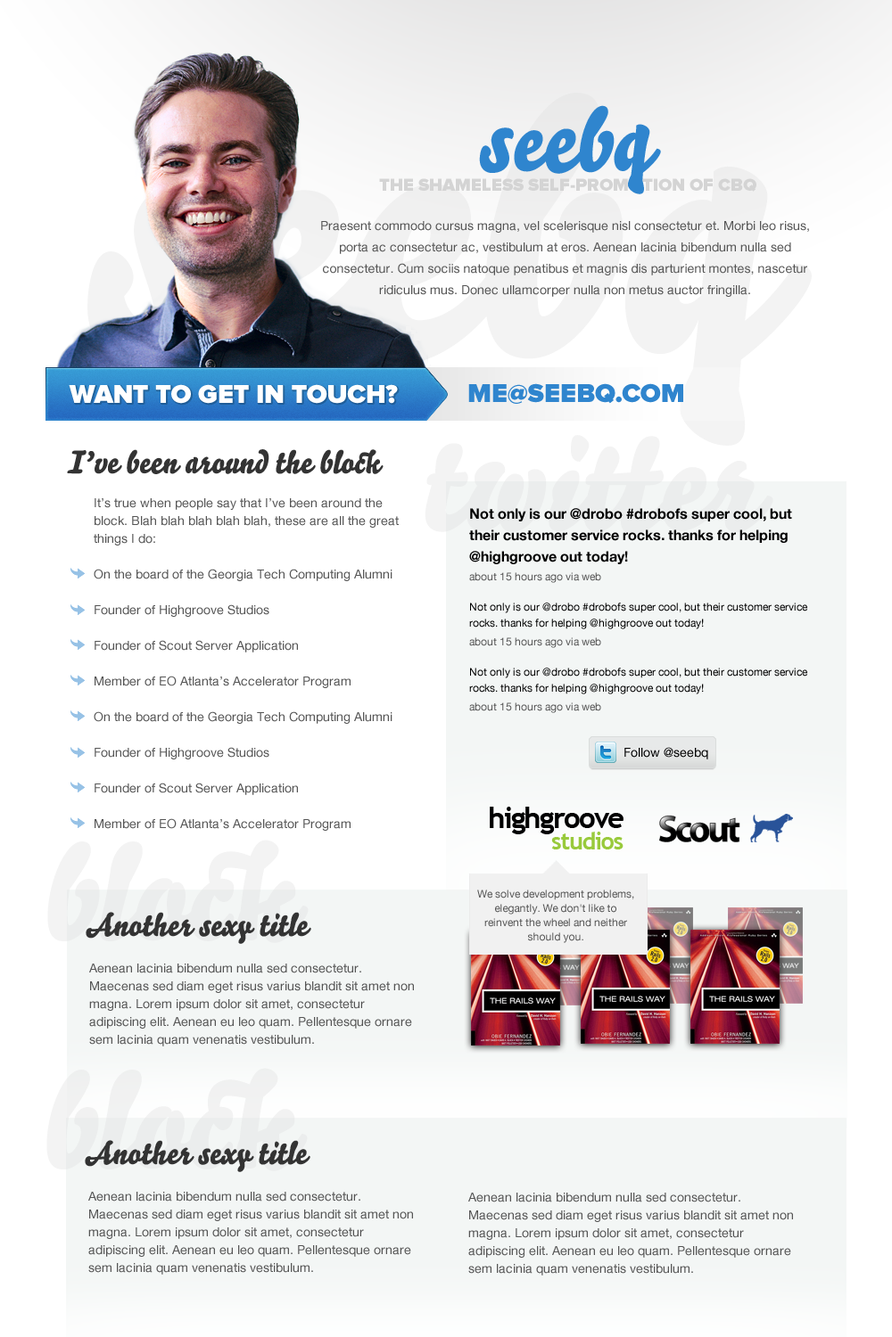
<style>
.page{position:relative;width:892px;height:1337px;background:#ffffff}
.page>*{position:absolute;margin:0}
.t1{font:12.5px/21.4px "HelveticaNeue";color:#555555}
.t2{font:89.2px "Bello-Pro";color:#2f85ce}
.t3{font:17.8px "ProximaNova-Black";color:#d4d4d4}
.t4{font:26.8px "ProximaNova-Black";color:#ffffff}
.t5{font:26.8px "ProximaNova-Black";color:#2f85ce}
.t6{font:32.1px "Bello-Pro";color:#333333}
.t7{font:12.5px/17.8px "HelveticaNeue";color:#555555}
.t8{font:14.3px/21.4px "HelveticaNeue-Bold";color:#000000}
.t9{font:10.7px/4.5px "HelveticaNeue";color:#555555}
.t10{font:10.7px/16px "HelveticaNeue";color:#000000}
.t11{font:12.5px "HelveticaNeue";color:#000000}
.t12{font:10.7px/14.3px "HelveticaNeue";color:#555555}
</style>
<div class="page">
<p class="t1" style="left:321px;top:105px;width:488px;height:192px;text-align:center"><span class="t2">seebq<br><br></span>Praesent commodo cursus magna, vel scelerisque nisl consectetur et. Morbi leo risus, porta ac consectetur ac, vestibulum at eros. Aenean lacinia bibendum nulla sed consectetur. Cum sociis natoque penatibus et magnis dis parturient montes, nascetur ridiculus mus. Donec ullamcorper nulla non metus auctor fringilla.</p>
<p class="t3" style="left:379px;top:178px;width:377px;height:14px">THE SHAMELESS SELF-PROMOTION OF CBQ</p>
<p class="t4" style="left:69px;top:384px;width:329px;height:20px">WANT TO GET IN TOUCH?</p>
<p class="t5" style="left:468px;top:383px;width:215px;height:21px">ME@SEEBQ.COM</p>
<p class="t6" style="left:67px;top:449px;width:316px;height:25px">I’ve been around the block</p>
<p class="t1" style="left:94px;top:498px;width:305px;height:333px"><span class="t7">It’s true when people say that I’ve been around the block. Blah blah blah blah blah, these are all the great things I do:<br></span>On the board of the Georgia Tech Computing Alumni <br>Founder of Highgroove Studios<br>Founder of Scout Server Application<br>Member of EO Atlanta’s Accelerator Program<br>On the board of the Georgia Tech Computing Alumni <br>Founder of Highgroove Studios<br>Founder of Scout Server Application<br>Member of EO Atlanta’s Accelerator Program</p>
<p class="t8" style="left:469px;top:508px;width:338px;height:205px">Not only is our @drobo #drobofs super cool, but their customer service rocks. thanks for helping @highgroove out today!<br><span class="t9">about 15 hours ago via web <br></span><span class="t10">Not only is our @drobo #drobofs super cool, but their customer service rocks. thanks for helping @highgroove out today!<br></span><span class="t9">about 15 hours ago via web <br></span><span class="t10">Not only is our @drobo #drobofs super cool, but their customer service rocks. thanks for helping @highgroove out today!<br></span><span class="t9">about 15 hours ago via web</span></p>
<p class="t11" style="left:624px;top:747px;width:84px;height:13px">Follow @seebq</p>
<p class="t12" style="left:477px;top:890px;width:157px;height:53px;text-align:center">We solve development problems, elegantly. We don't like to reinvent the wheel and neither should you.</p>
<p class="t6" style="left:86px;top:912px;width:225px;height:32px">Another sexy title</p>
<p class="t7" style="left:89px;top:964px;width:325px;height:83px">Aenean lacinia bibendum nulla sed consectetur. Maecenas sed diam eget risus varius blandit sit amet non magna. Lorem ipsum dolor sit amet, consectetur adipiscing elit. Aenean eu leo quam. Pellentesque ornare sem lacinia quam venenatis vestibulum.</p>
<p class="t6" style="left:85px;top:1140px;width:225px;height:32px">Another sexy title</p>
<p class="t7" style="left:88px;top:1192px;width:325px;height:83px">Aenean lacinia bibendum nulla sed consectetur. Maecenas sed diam eget risus varius blandit sit amet non magna. Lorem ipsum dolor sit amet, consectetur adipiscing elit. Aenean eu leo quam. Pellentesque ornare sem lacinia quam venenatis vestibulum.</p>
<p class="t7" style="left:468px;top:1193px;width:325px;height:83px">Aenean lacinia bibendum nulla sed consectetur. Maecenas sed diam eget risus varius blandit sit amet non magna. Lorem ipsum dolor sit amet, consectetur adipiscing elit. Aenean eu leo quam. Pellentesque ornare sem lacinia quam venenatis vestibulum.</p>
</div>
